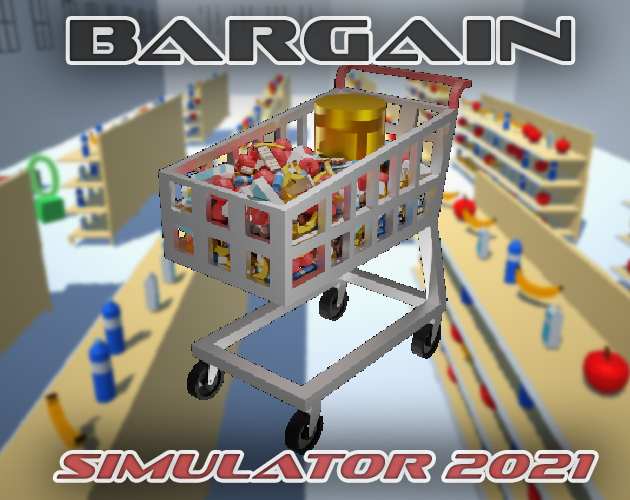
<style>
.page{position:relative;width:630px;height:500px}
.page>*{position:absolute;margin:0}
.t1{font:36px "SofachromeRg-Italic";letter-spacing:0.05em;color:#c24e4e}
.t2{font:60px "SofachromeRg-Regular";letter-spacing:0.05em;color:#2e2e2e}
</style>
<div class="page">
<p class="t1" style="left:56px;top:20px;width:539px;height:459px;text-align:center;opacity:0.94"><span class="t2">BARGAIN<br><br></span><br><br><br><br><br><br><br>SIMULATOR 2021</p>
</div>
